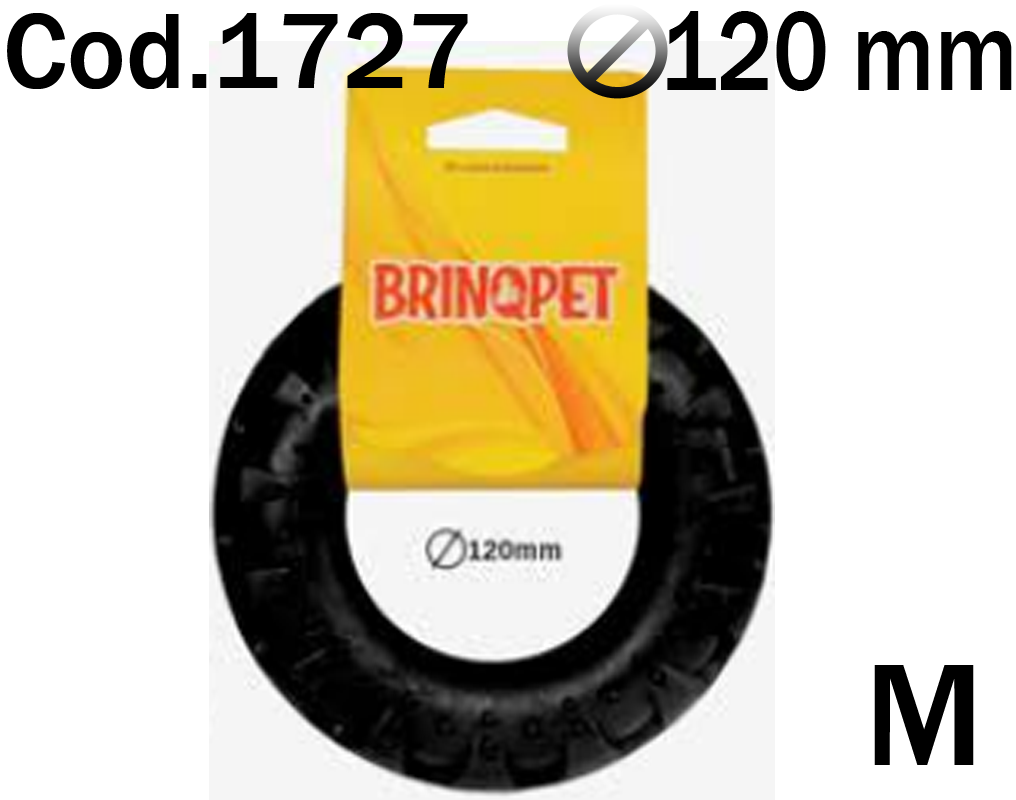
<style>
.page{position:relative;width:1016px;height:800px;background:#ffffff}
.page>*{position:absolute;margin:0}
.t1{font:111.2px "FranklinGothic-Medium";color:#000000}
.t2{font:116.6px "FranklinGothic-Medium";color:#000000;scale:0.82 1}
.t3{font:150.1px "FranklinGothic-Medium";color:#000000}
</style>
<div class="page">
<p class="t1" style="left:7px;top:13px;width:461px;height:76px">Cod.1727</p>
<p class="t2" style="left:667px;top:11px;width:345px;height:80px">120 mm</p>
<p class="t3" style="left:874px;top:665px;width:100px;height:100px">M</p>
</div>
